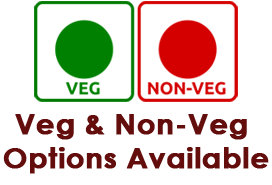
<style>
.page{position:relative;width:272px;height:185px;background:#ffffff}
.page>*{position:absolute;margin:0}
.t1{font:27.8px "CenturyGothic-Bold";color:#640d0d;font-weight:bold;scale:1.05 1}
</style>
<div class="page">
<p class="t1" style="left:3px;top:114px;width:266px;height:60px;text-align:center">Veg &amp; Non-Veg <br>Options Available</p>
</div>
